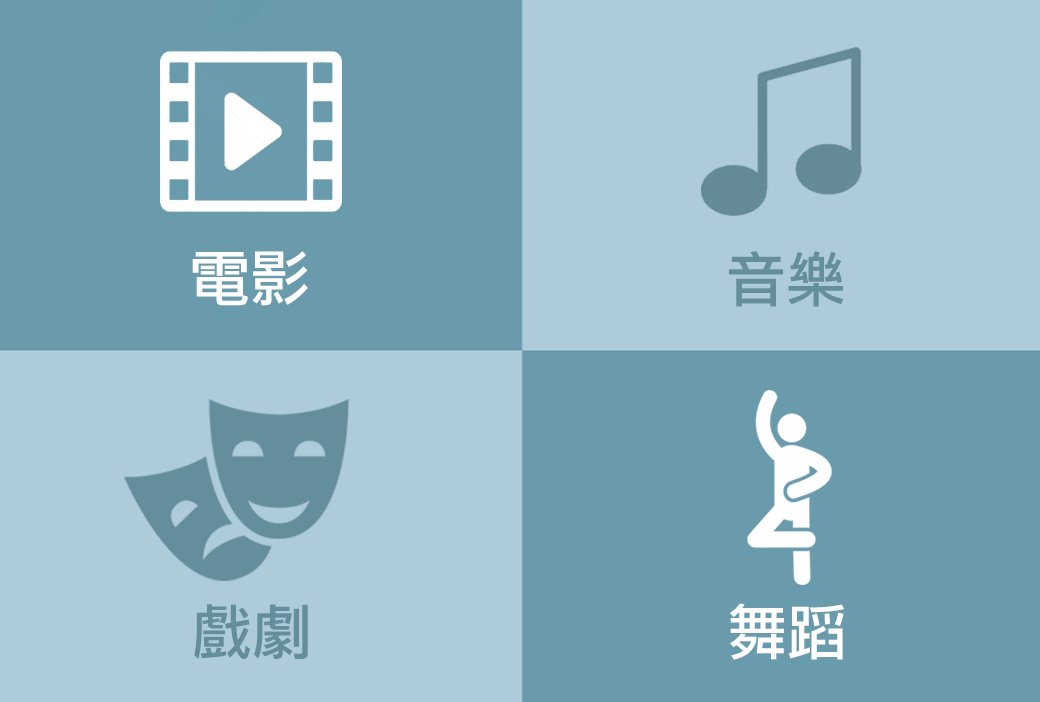
<style>
.page{position:relative;width:1040px;height:702px;background:#699bac}
.page>*{position:absolute;margin:0}
.t1{font:60px "DFLiHei-W5-WIN-BF";color:#ffffff}
.t2{font:60px "DFLiHei-W5-WIN-BF";color:#648e9c}
</style>
<div class="page">
<p class="t1" style="left:192px;top:251px;width:116px;height:55px">電影</p>
<p class="t2" style="left:729px;top:251px;width:115px;height:56px">音樂</p>
<p class="t2" style="left:194px;top:604px;width:114px;height:56px">戲劇</p>
<p class="t1" style="left:730px;top:603px;width:115px;height:57px">舞蹈</p>
</div>
